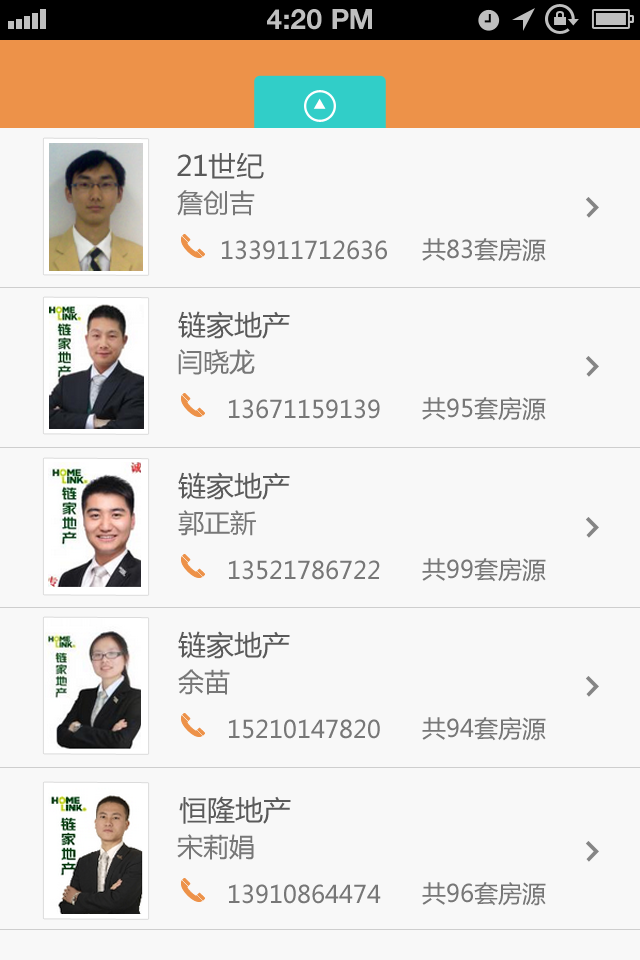
<style>
.page{position:relative;width:640px;height:960px;background:#f8f8f8}
.page>*{position:absolute;margin:0}
.t1{font:28px "HelveticaNeue-Bold";color:#bfbfbf;text-transform:uppercase}
.t2{font:28px "MicrosoftYaHei";color:#5a5a5a}
.t3{font:26px "MicrosoftYaHei";color:#777777}
.t4{font:24px "MicrosoftYaHei";color:#777777}
</style>
<div class="page">
<p class="t1" style="left:267px;top:9px;width:105px;height:21px">4:20 PM</p>
<p class="t2" style="left:177px;top:152px;width:87px;height:27px">21世纪</p>
<p class="t3" style="left:177px;top:190px;width:78px;height:26px">詹创吉</p>
<p class="t4" style="left:222px;top:240px;width:165px;height:20px">133911712636</p>
<p class="t4" style="left:422px;top:238px;width:124px;height:24px">共83套房源</p>
<p class="t2" style="left:178px;top:311px;width:112px;height:28px">链家地产</p>
<p class="t3" style="left:178px;top:349px;width:77px;height:26px">闫晓龙</p>
<p class="t4" style="left:229px;top:399px;width:151px;height:20px">13671159139</p>
<p class="t4" style="left:422px;top:397px;width:124px;height:24px">共95套房源</p>
<p class="t2" style="left:178px;top:472px;width:112px;height:28px">链家地产</p>
<p class="t3" style="left:178px;top:510px;width:78px;height:26px">郭正新</p>
<p class="t4" style="left:422px;top:558px;width:124px;height:24px">共99套房源</p>
<p class="t4" style="left:229px;top:560px;width:151px;height:20px">13521786722</p>
<p class="t2" style="left:178px;top:631px;width:112px;height:28px">链家地产</p>
<p class="t3" style="left:178px;top:669px;width:52px;height:26px">余苗</p>
<p class="t4" style="left:229px;top:719px;width:151px;height:20px">15210147820</p>
<p class="t4" style="left:422px;top:717px;width:124px;height:24px">共94套房源</p>
<p class="t2" style="left:179px;top:796px;width:112px;height:28px">恒隆地产</p>
<p class="t3" style="left:177px;top:834px;width:77px;height:26px">宋莉娟</p>
<p class="t4" style="left:229px;top:884px;width:152px;height:20px">13910864474</p>
<p class="t4" style="left:422px;top:882px;width:124px;height:24px">共96套房源</p>
</div>
